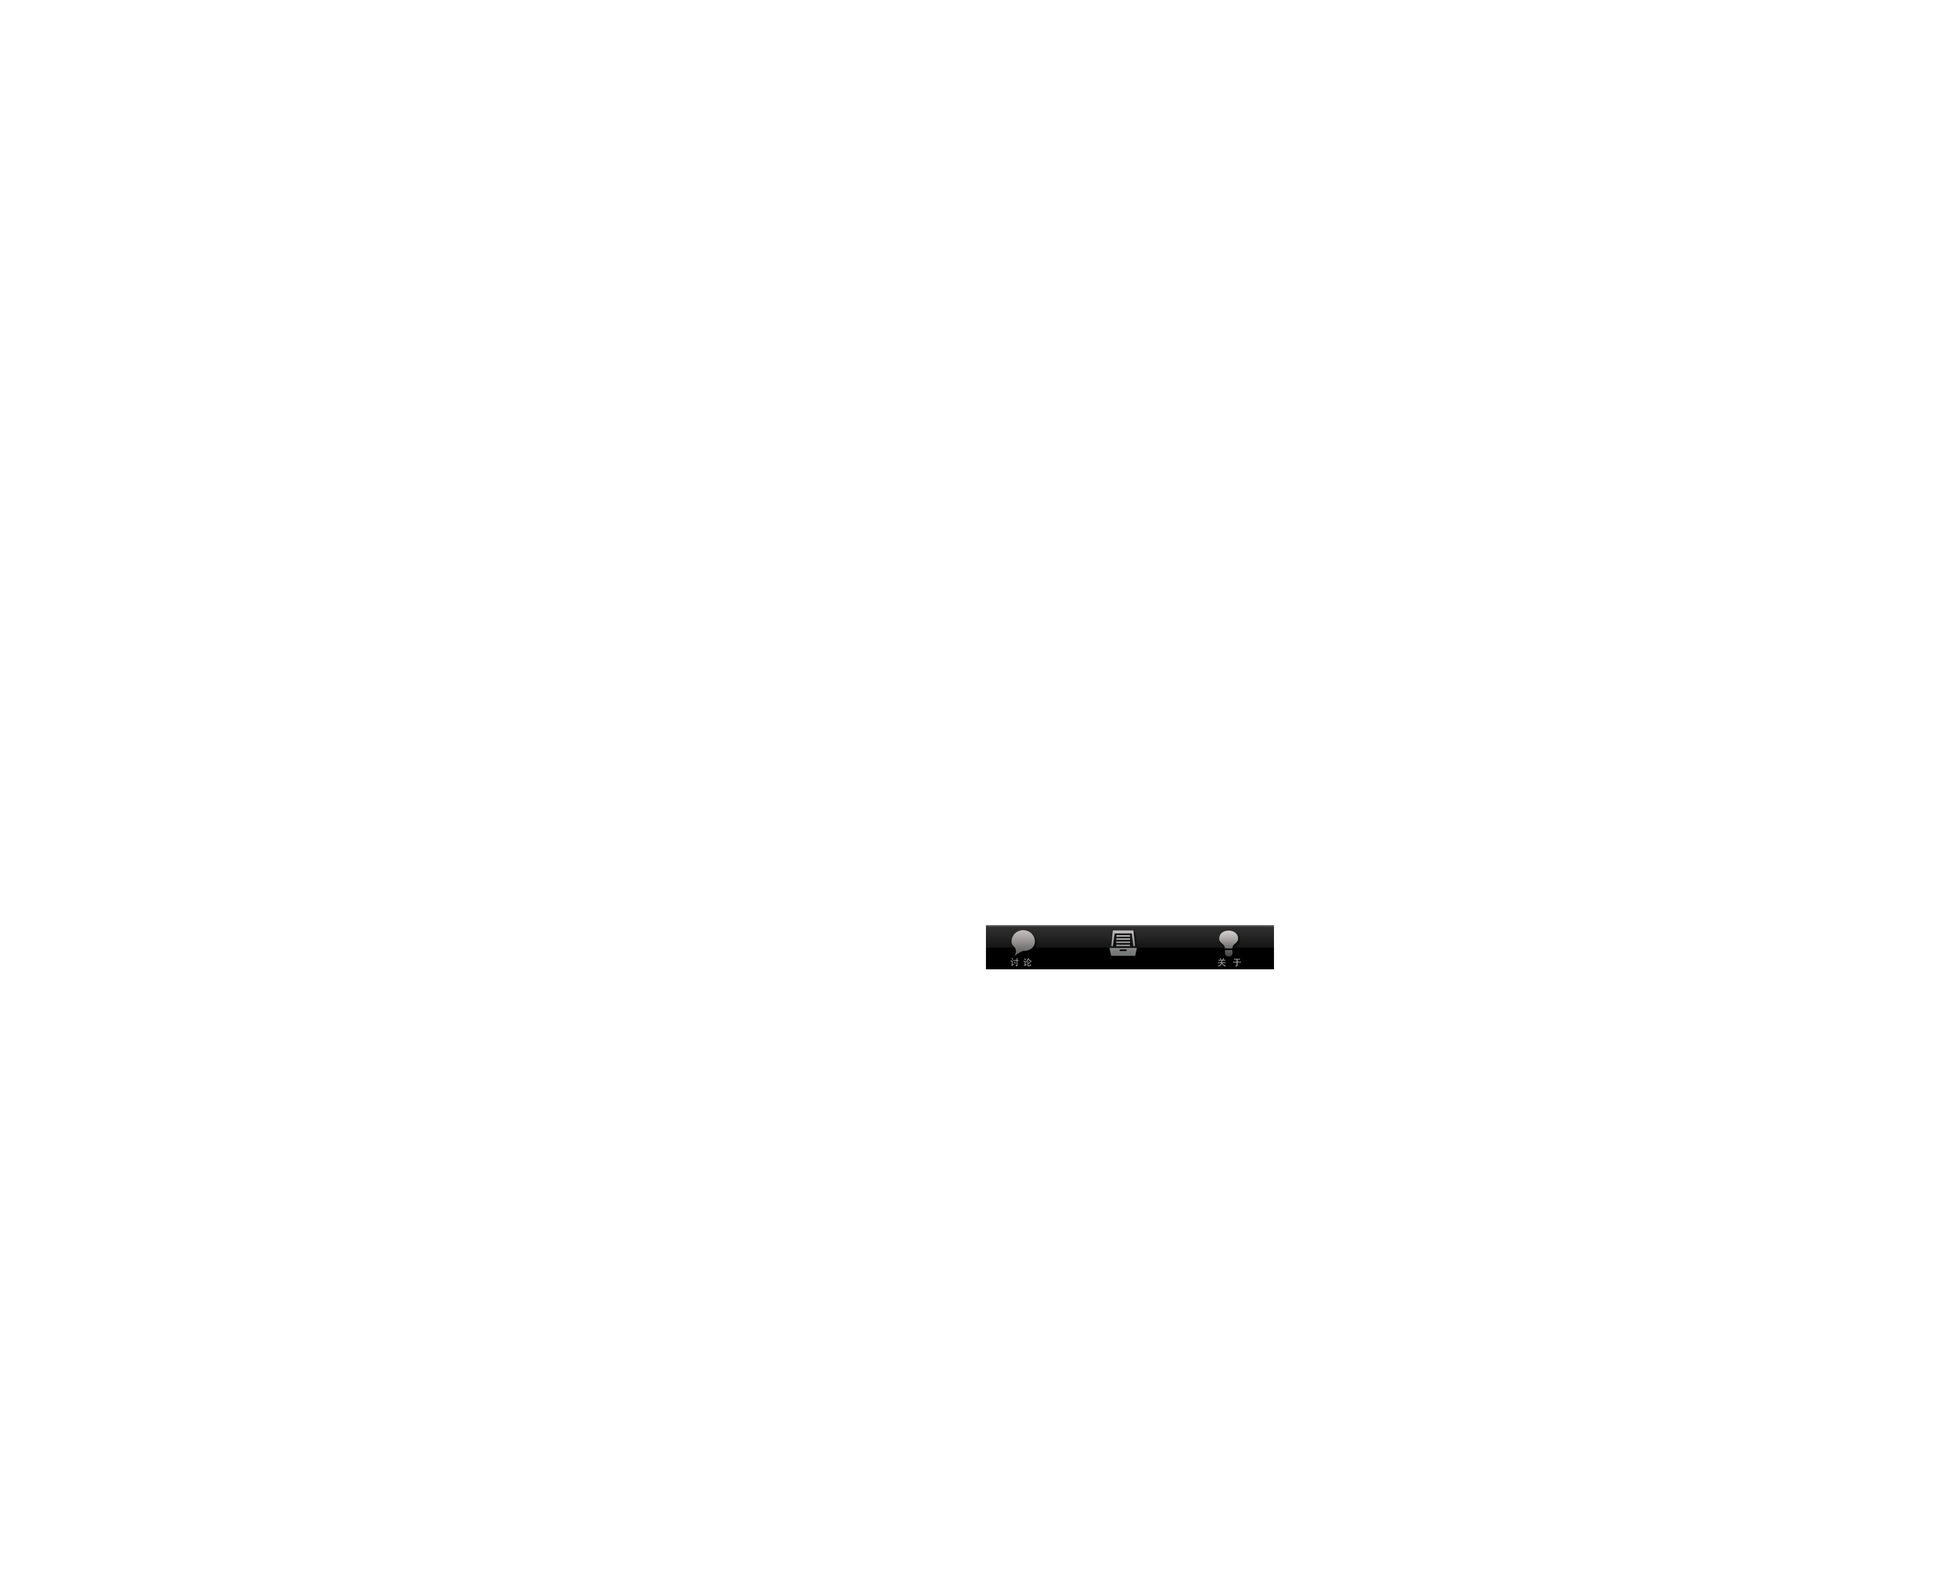
<style>
.page{position:relative;width:1935px;height:1575px;background:#ffffff}
.page>*{position:absolute;margin:0}
.t1{font:9px "AdobeHeitiStd-Regular";color:#a8a8a8}
</style>
<div class="page">
<p class="t1" style="left:1010px;top:958px;width:22px;height:9px">讨  论</p>
<p class="t1" style="left:1218px;top:958px;width:23px;height:9px">关   于</p>
</div>
